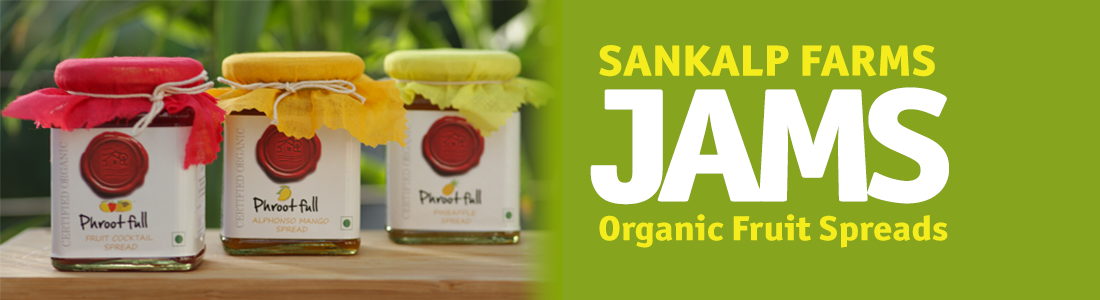
<style>
.page{position:relative;width:1100px;height:300px;background:#87a41e}
.page>*{position:absolute;margin:0}
.t1{font:44.1px "OfficinaSansITC-ExtraBold";color:#f4ec1c;scale:1.1 1}
.t2{font:162.9px "OfficinaSansITC-ExtraBold";letter-spacing:-0.08em;color:#ffffff;scale:1.1 1}
.t3{font:35px "OfficinaSansITC-ExtraBold";color:#f4ec1c;scale:1.1 1}
</style>
<div class="page">
<p class="t1" style="left:599px;top:45px;width:336px;height:32px">SANKALP FARMS</p>
<p class="t2" style="left:590px;top:87px;width:359px;height:118px">JAMS</p>
<p class="t3" style="left:599px;top:214px;width:349px;height:34px">Organic Fruit Spreads</p>
</div>
